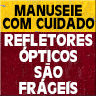
<style>
.page{position:relative;width:96px;height:96px}
.page>*{position:absolute;margin:0}
.t1{font:16px/12.5px "CartesDisplaySSK";color:#000000;text-transform:uppercase;scale:0.88 1}
.t2{font:16.7px/16px "CartesDisplaySSK";color:#ffffff;text-transform:uppercase;scale:0.9 1}
.t3{font:10.8px "CartesDisplaySSK";color:#ffffff;text-transform:uppercase;font-style:italic;scale:1.54 1}
.t4{font:16.7px "TimesNewRomanPSMT";text-transform:uppercase}
</style>
<div class="page">
<p class="t1" style="left:2px;top:4px;width:93px;height:25px;text-align:center">Manuseie<br>com cuidado</p>
<p class="t2" style="left:4px;top:34px;width:89px;height:60px;text-align:center">REFLETORES<br>opticos<br>sao<br>frageis</p>
<p class="t3" style="left:22px;top:46px;width:5px;height:4px">,</p>
<p class="t4" style="left:45px;top:63px;width:5px;height:2px">-</p>
<p class="t3" style="left:40px;top:78px;width:5px;height:4px">,</p>
</div>
